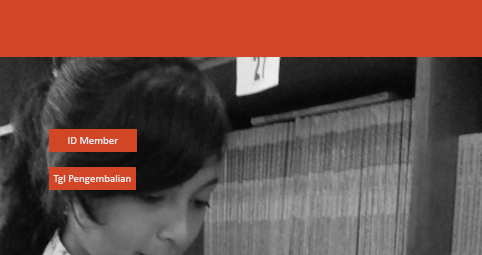
<style>
.page{position:relative;width:482px;height:255px;background:#d24625}
.page>*{position:absolute;margin:0}
.t1{font:11px "Calibri";color:#e5e5e5}
</style>
<div class="page">
<p class="t1" style="left:68px;top:137px;width:50px;height:7px">ID Member</p>
<p class="t1" style="left:53px;top:175px;width:78px;height:9px">Tgl Pengembalian</p>
</div>
